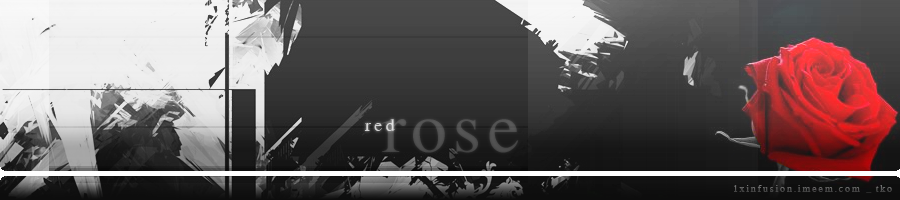
<style>
.page{position:relative;width:900px;height:200px}
.page>*{position:absolute;margin:0}
.t1{font:18px "Romantic";letter-spacing:0.2em;color:#d5d5d5}
.t2{font:72px "Romantic";letter-spacing:0.1em;color:#515151}
.t3{font:10px "Romantic";letter-spacing:0.2em;color:#4c4c4c}
</style>
<div class="page">
<p class="t1" style="left:364px;top:119px;width:31px;height:12px">red</p>
<p class="t2" style="left:382px;top:119px;width:137px;height:34px">rose</p>
<p class="t3" style="left:734px;top:185px;width:158px;height:8px">1xinfusion.imeem.com _tko</p>
</div>
